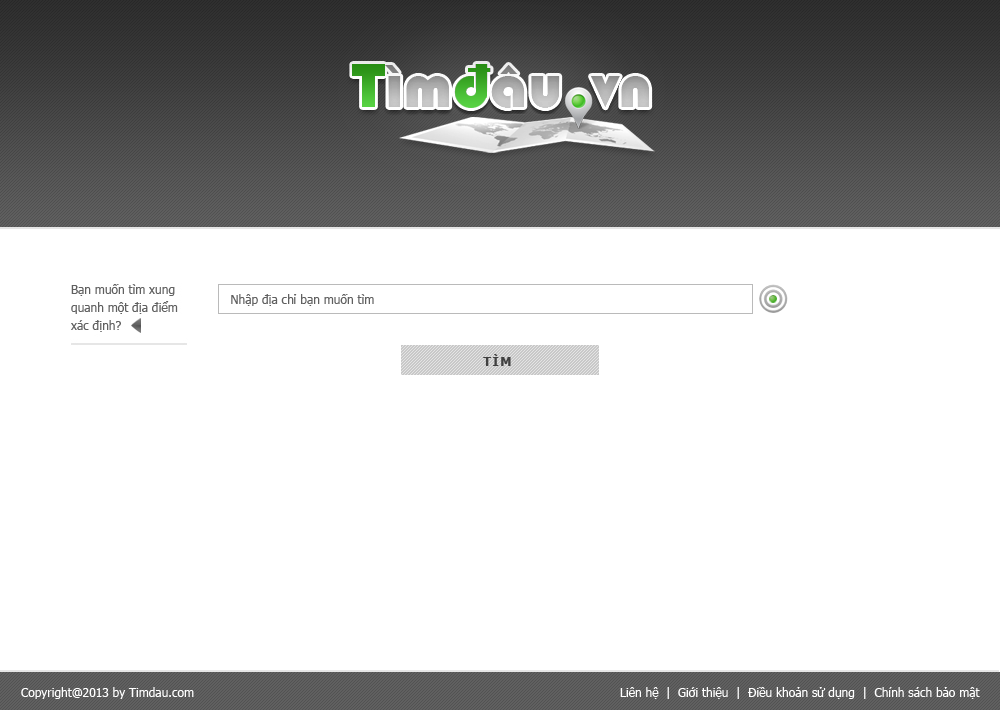
<style>
.page{position:relative;width:1000px;height:710px;background:#ffffff}
.page>*{position:absolute;margin:0}
.t1{font:12px "Tahoma";color:#606060}
.t2{font:12px "Verdana-Bold";letter-spacing:0.1em;color:#404040}
.t3{font:12px "Tahoma";color:#ffffff}
</style>
<div class="page">
<p class="t1" style="left:231px;top:294px;width:143px;height:12px">Nhập địa chỉ bạn muốn tìm</p>
<p class="t2" style="left:483px;top:354px;width:28px;height:12px">TÌM</p>
<p class="t3" style="left:21px;top:687px;width:173px;height:12px">Copyright@2013 by Timdau.com</p>
<p class="t3" style="left:620px;top:687px;width:360px;height:12px">Liên hệ  |  Giới thiệu  |  Điều khoản sử dụng  |  Chính sách bảo mật</p>
</div>
